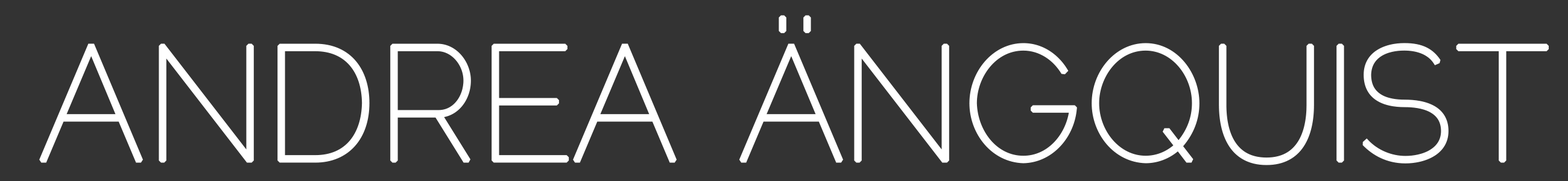
<style>
.page{position:relative;width:1568px;height:181px;background:#333333}
.page>*{position:absolute;margin:0}
.t1{font:161.2px "Raleway-Thin";color:#ffffff;text-transform:uppercase;font-weight:bold;scale:0.97 1}
</style>
<div class="page">
<p class="t1" style="left:39px;top:15px;width:1510px;height:150px">Andrea Ängquist</p>
</div>
